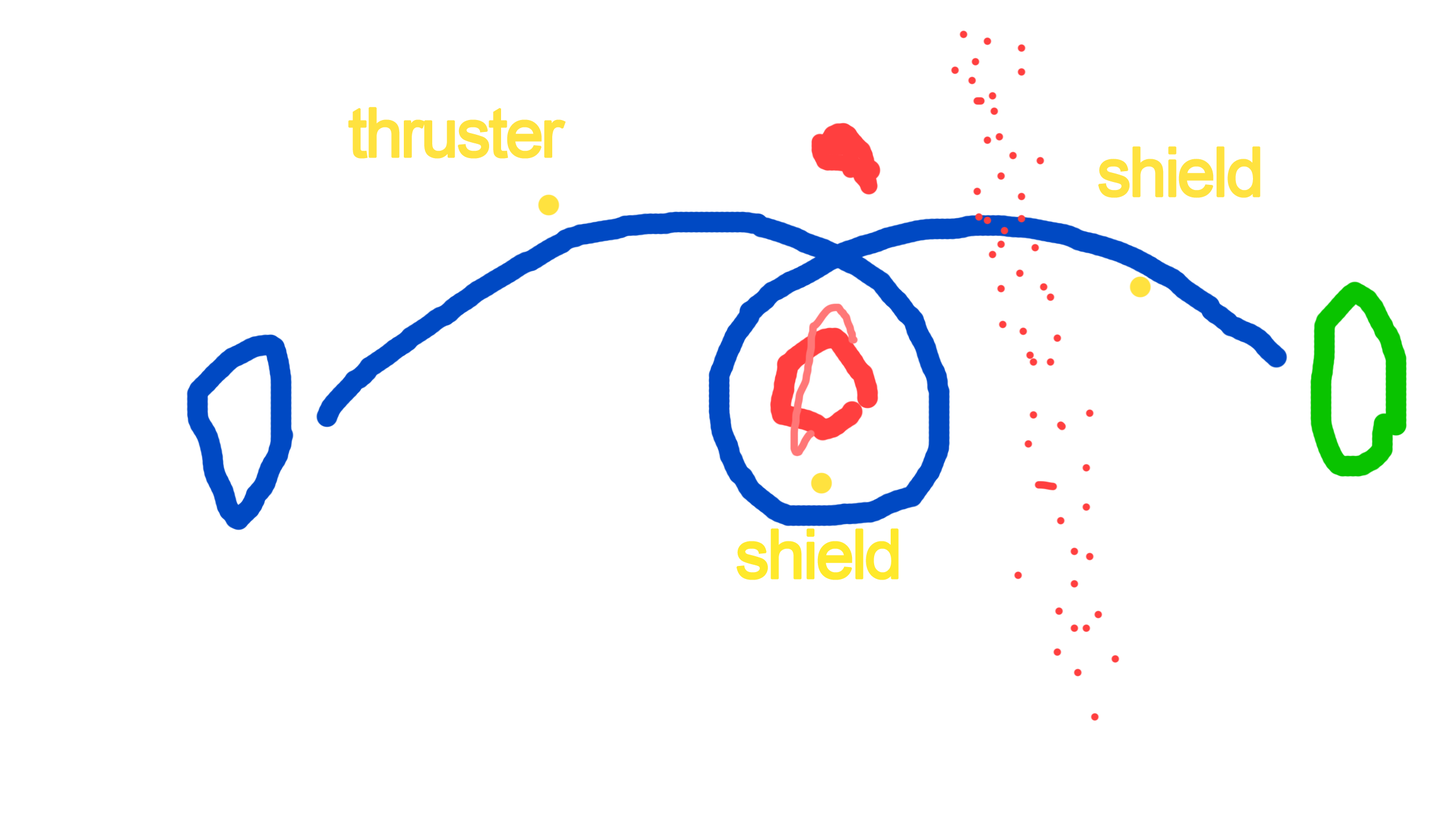
<style>
.page{position:relative;width:1456px;height:819px;background:#ffffff}
.page>*{position:absolute;margin:0}
.t1{font:68.2px "ArialMT";letter-spacing:-0.06em;color:#ffe23f;font-weight:bold}
.t2{font:68.2px "ArialMT";letter-spacing:-0.06em;color:#ffe92b;font-weight:bold}
</style>
<div class="page">
<p class="t1" style="left:348px;top:107px;width:218px;height:52px">thruster</p>
<p class="t1" style="left:1098px;top:146px;width:162px;height:52px">shield</p>
<p class="t2" style="left:737px;top:528px;width:162px;height:52px">shield</p>
</div>
